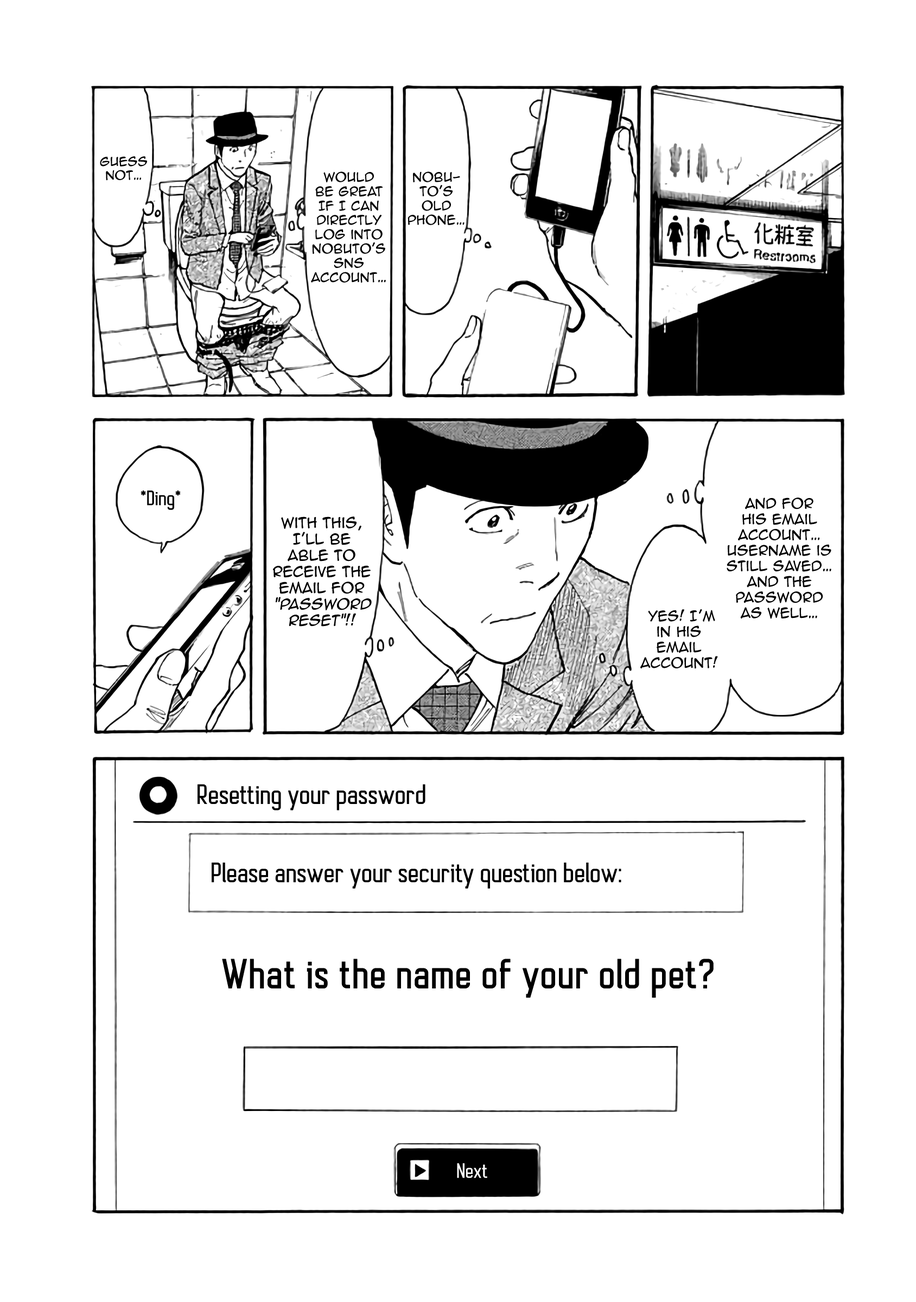
<style>
.page{position:relative;width:916px;height:1302px;background:#ffffff}
.page>*{position:absolute;margin:0}
.t1{font:11.4px "AnimeAce2.0BB";color:#000000}
.t2{font:11.9px "AnimeAce2.0BB";color:#000000}
.t3{font:19.5px "AutobusBold";color:#000000}
.t4{font:13px "AnimeAce2.0BB";color:#000000}
.t5{font:13.6px "AnimeAce2.0BB";color:#000000}
.t6{font:13.6px "AnimeAce2.0BB";color:#000000;font-style:italic}
.t7{font:26px "AutobusBold";color:#000000}
.t8{font:38.5px "AutobusBold";color:#000000;font-weight:bold}
.t9{font:19.5px "AutobusBold";color:#fefefe}
</style>
<div class="page">
<p class="t1" style="left:100px;top:156px;width:47px;height:25px;text-align:center">Guess not…</p>
<p class="t2" style="left:311px;top:171px;width:75px;height:112px;text-align:center">Would<br>be great <br>If I can<br>directly log into Nobuto's SNS <br>account…</p>
<p class="t2" style="left:407px;top:171px;width:57px;height:54px;text-align:center">Nobuto's old phone…</p>
<p class="t3" style="left:141px;top:490px;width:40px;height:20px">*Ding*</p>
<p class="t4" style="left:726px;top:498px;width:105px;height:121px;text-align:center">and for<br>his email <br>account… username is still saved… and the password<br>as well…</p>
<p class="t5" style="left:273px;top:516px;width:99px;height:111px;text-align:center">with this, I'll be <br>able to <br>receive the email for<br><span class="t6">"password reset"</span>!!</p>
<p class="t4" style="left:640px;top:609px;width:78px;height:60px;text-align:center">Yes! I’m in his email <br>account!</p>
<p class="t7" style="left:197px;top:784px;width:228px;height:27px">Resetting your password</p>
<p class="t7" style="left:212px;top:863px;width:409px;height:26px">Please answer your security question below:</p>
<p class="t8" style="left:222px;top:959px;width:491px;height:39px">What is the name of your old pet?</p>
<p class="t9" style="left:457px;top:1163px;width:30px;height:15px">Next</p>
</div>
